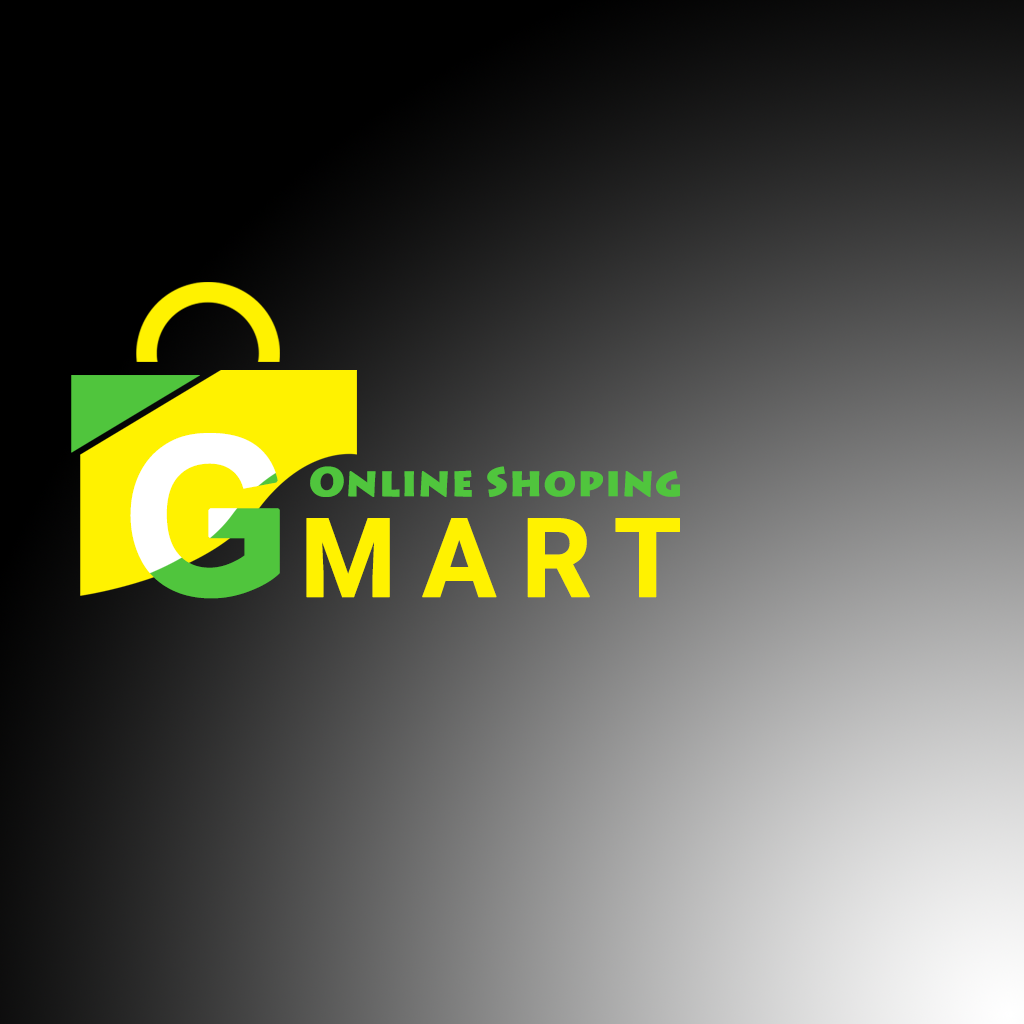
<style>
.page{position:relative;width:1024px;height:1024px}
.page>*{position:absolute;margin:0}
.t1{font:218px "Arial-BoldMT";font-weight:bold}
.t2{font:40.5px "LithosPro-Black";color:#50c53d;font-weight:bold}
.t3{font:110px "Roboto-Bold";letter-spacing:0.2em;color:#fff200;font-weight:bold}
</style>
<div class="page">
<p class="t1" style="left:130px;top:433px;width:150px;height:166px">G</p>
<p class="t2" style="left:310px;top:466px;width:370px;height:31px">Online Shoping</p>
<p class="t3" style="left:306px;top:518px;width:374px;height:80px">MART</p>
</div>
